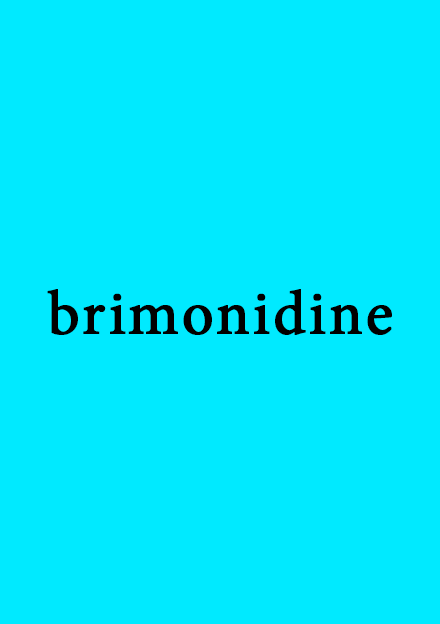
<style>
.page{position:relative;width:440px;height:624px;background:#00eaff}
.page>*{position:absolute;margin:0}
.t1{font:75px "AdobeThai-Regular";letter-spacing:0.02em;color:#000000;font-weight:bold}
</style>
<div class="page">
<p class="t1" style="left:47px;top:289px;width:345px;height:46px">brimonidine</p>
</div>
